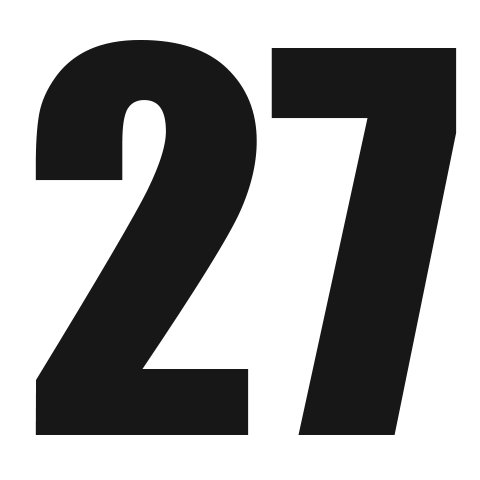
<style>
.page{position:relative;width:480px;height:480px;background:#ffffff}
.page>*{position:absolute;margin:0}
.t1{font:490.3px "Impact";color:#171717}
</style>
<div class="page">
<p class="t1" style="left:35px;top:40px;width:422px;height:395px">27</p>
</div>
